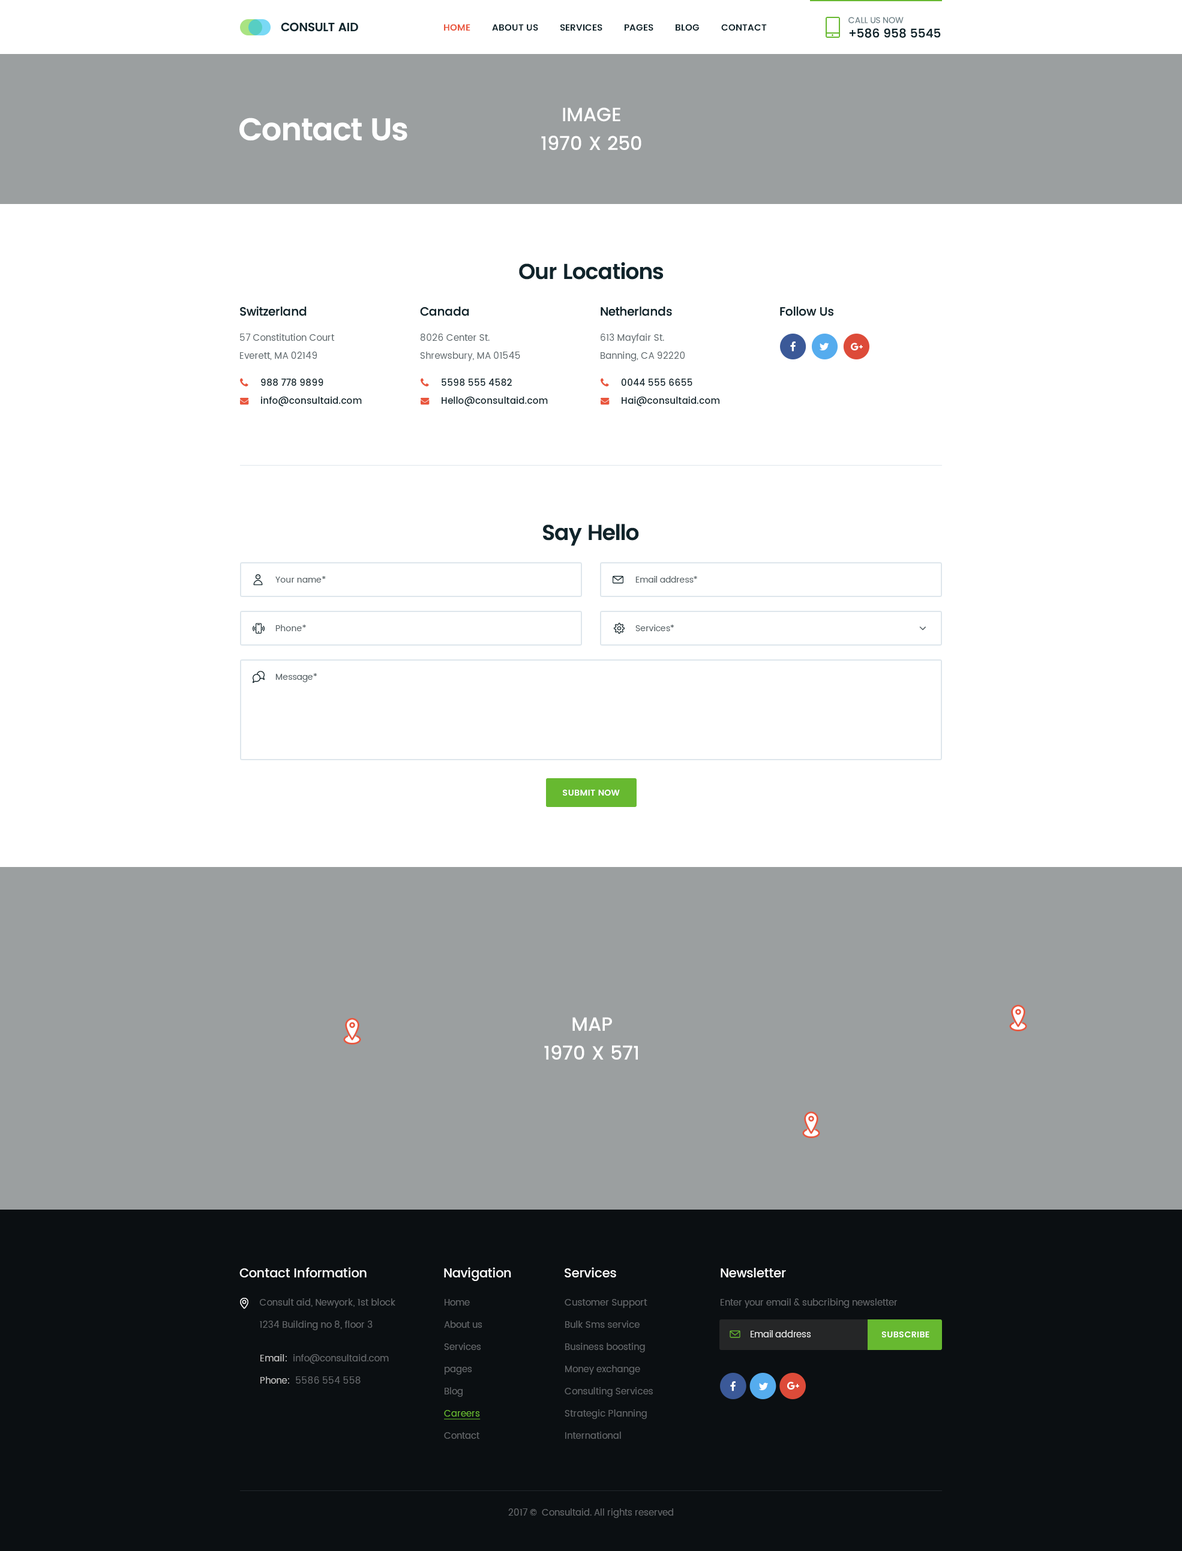
<style>
.page{position:relative;width:1182px;height:1551px;background:#ffffff}
.page>*{position:absolute;margin:0}
.t1{font:12px "Poppins-Medium";letter-spacing:-0.005em;color:#10242b;text-transform:uppercase}
.t2{font:8.4px "Poppins-Regular";letter-spacing:-0.005em;color:#718389;text-transform:uppercase}
.t3{font:9px "Poppins-SemiBold";color:#10242b;text-transform:uppercase}
.t4{font:9px "Poppins-SemiBold";color:#e9563d;text-transform:uppercase}
.t5{font:19.2px/28.8px "Poppins-Medium";color:#ffffff;text-transform:uppercase}
.t6{font:31.3px "Poppins-SemiBold";letter-spacing:-0.03em;color:#ffffff}
.t7{font:21.6px "Poppins-SemiBold";letter-spacing:-0.03em;color:#10242b}
.t8{font:12px "Poppins-Medium";letter-spacing:-0.01em;color:#10242b}
.t9{font:9px/18px "Poppins-Regular";letter-spacing:0.01em;color:#5c666a}
.t10{font:9px/18px "Poppins-Medium";letter-spacing:0.01em;color:#10242b}
.t11{font:8.4px "Poppins-Regular";letter-spacing:0.01em;color:#5c666a}
.t12{font:8.4px "Poppins-SemiBold";letter-spacing:0.025em;color:#ffffff;text-transform:uppercase}
.t13{font:12.6px "Poppins-Medium";letter-spacing:-0.01em;color:#ffffff}
.t14{font:9px/22.2px "Poppins-Regular";letter-spacing:0.01em;color:#64676a}
.t15{font:9px/22.2px "Poppins-Regular";color:#64676a}
.t16{font:9px/22.2px "Poppins-Regular";color:#67b930;text-decoration:underline}
.t17{font:9px "Poppins-Regular";color:#64676a}
.t18{font:8.7px "Poppins-Regular";color:#ececec}
.t19{font:9px/22.2px "Poppins-Regular";letter-spacing:0.01em;color:#c5c5c5}
.t20{font:9px/22.2px "Poppins-Regular";letter-spacing:0.01em;color:#c4c4c4}
</style>
<div class="page">
<p class="t1" style="left:848px;top:17px;width:93px;height:21px"><span class="t2">Call us now<br></span>+586 958 5545</p>
<p class="t3" style="left:444px;top:24px;width:323px;height:7px"><span class="t4">Home</span>         about us         services         Pages         blog         contact</p>
<p class="t5" style="left:541px;top:107px;width:100px;height:43px;text-align:center">Image<br>1970 x 250</p>
<p class="t6" style="left:239px;top:118px;width:168px;height:23px">Contact Us</p>
<p class="t7" style="left:519px;top:262px;width:145px;height:18px">Our Locations</p>
<p class="t8" style="left:240px;top:306px;width:67px;height:10px">Switzerland</p>
<p class="t8" style="left:420px;top:307px;width:49px;height:9px">Canada</p>
<p class="t8" style="left:601px;top:307px;width:71px;height:9px">Netherlands</p>
<p class="t8" style="left:780px;top:307px;width:54px;height:9px">Follow Us</p>
<p class="t9" style="left:240px;top:334px;width:95px;height:26px">57 Constitution Court <br>Everett, MA 02149</p>
<p class="t9" style="left:420px;top:334px;width:100px;height:27px">8026 Center St. <br>Shrewsbury, MA 01545</p>
<p class="t9" style="left:601px;top:334px;width:84px;height:27px">613 Mayfair St. <br>Banning, CA 92220</p>
<p class="t10" style="left:260px;top:379px;width:102px;height:27px">988 778 9899<br>info@consultaid.com</p>
<p class="t10" style="left:442px;top:379px;width:106px;height:27px">5598 555 4582<br>Hello@consultaid.com</p>
<p class="t10" style="left:621px;top:379px;width:99px;height:27px">0044 555 6655<br>Hai@consultaid.com</p>
<p class="t7" style="left:543px;top:524px;width:96px;height:22px">Say Hello</p>
<p class="t11" style="left:275px;top:576px;width:51px;height:7px">Your name*</p>
<p class="t11" style="left:635px;top:576px;width:62px;height:7px">Email address*</p>
<p class="t11" style="left:275px;top:625px;width:31px;height:6px">Phone*</p>
<p class="t11" style="left:635px;top:625px;width:39px;height:6px">Services*</p>
<p class="t11" style="left:275px;top:673px;width:42px;height:9px">Message*</p>
<p class="t12" style="left:563px;top:790px;width:57px;height:6px">Submit Now</p>
<p class="t5" style="left:544px;top:1017px;width:94px;height:43px;text-align:center">Map<br>1970 x 571</p>
<p class="t13" style="left:239px;top:1267px;width:128px;height:10px">Contact Information</p>
<p class="t13" style="left:444px;top:1267px;width:67px;height:14px">Navigation</p>
<p class="t13" style="left:565px;top:1267px;width:51px;height:10px">Services</p>
<p class="t13" style="left:721px;top:1268px;width:65px;height:9px">Newsletter</p>
<p class="t14" style="left:260px;top:1298px;width:135px;height:32px">Consult aid, Newyork, 1st block <br>1234 Building no 8, floor 3</p>
<p class="t15" style="left:444px;top:1299px;width:38px;height:140px">Home<br>About us<br>Services<br>pages<br>Blog<br><span class="t16">Careers<br></span>Contact</p>
<p class="t14" style="left:565px;top:1299px;width:88px;height:140px">Customer Support<br>Bulk Sms service<br>Business boosting<br>Money exchange<br>Consulting Services<br>Strategic Planning<br>International</p>
<p class="t17" style="left:721px;top:1298px;width:177px;height:10px">Enter your email &amp; subcribing newsletter</p>
<p class="t18" style="left:751px;top:1330px;width:60px;height:7px">Email address</p>
<p class="t12" style="left:881px;top:1331px;width:48px;height:6px">Subscribe</p>
<p class="t14" style="left:260px;top:1354px;width:129px;height:30px"><span class="t19">Email:</span>  info@consultaid.com<br><span class="t20">Phone:</span>  5586 554 558</p>
<p class="t17" style="left:508px;top:1508px;width:165px;height:10px">2017 ©  Consultaid. All rights reserved</p>
</div>
